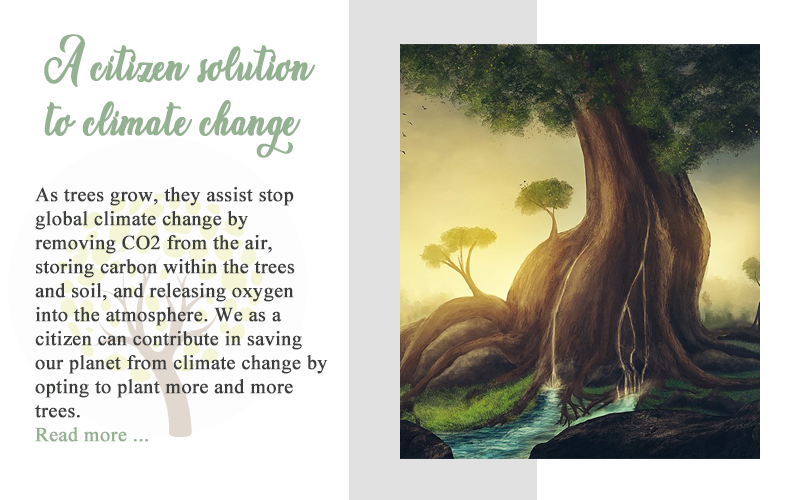
<style>
.page{position:relative;width:800px;height:500px;background:#ffffff}
.page>*{position:absolute;margin:0}
.t1{font:25px/55px "Amsterdam";color:#94b191;font-weight:bold}
.t2{font:20px "TimesNewRomanPSMT";color:#3c3f3c;font-weight:bold}
.t3{font:20px "TimesNewRomanPSMT";color:#94b191;font-weight:bold}
</style>
<div class="page">
<p class="t1" style="left:44px;top:34px;width:271px;height:124px">A citizen solution to climate change</p>
<p class="t2" style="left:35px;top:187px;width:293px;height:255px">As trees grow, they assist stop global climate change by removing CO2 from the air, storing carbon within the trees and soil, and releasing oxygen into the atmosphere. We as a citizen can contribute in saving our planet from climate change by opting to plant more and more trees.<br><span class="t3">Read more ...</span></p>
</div>
